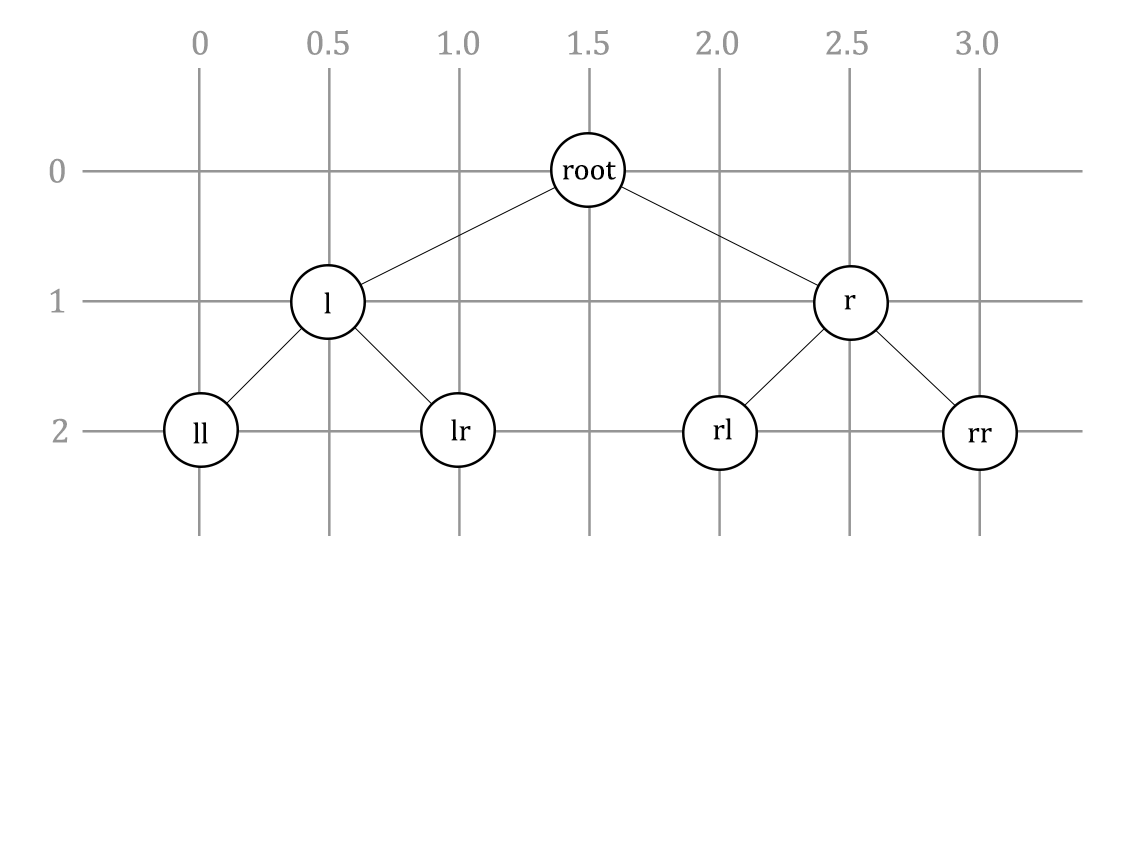
<style>
.page{position:relative;width:1135px;height:850px;background:#ffffff}
.page>*{position:absolute;margin:0}
.t1{font:35px "Cambria";color:#959595}
.t2{font:30px "Cambria";color:#000000}
</style>
<div class="page">
<p class="t1" style="left:192px;top:30px;width:16px;height:25px">0</p>
<p class="t1" style="left:307px;top:30px;width:42px;height:25px">0.5</p>
<p class="t1" style="left:438px;top:30px;width:42px;height:25px">1.0</p>
<p class="t1" style="left:568px;top:30px;width:41px;height:25px">1.5</p>
<p class="t1" style="left:696px;top:30px;width:43px;height:25px">2.0</p>
<p class="t1" style="left:826px;top:30px;width:42px;height:25px">2.5</p>
<p class="t1" style="left:956px;top:30px;width:43px;height:25px">3.0</p>
<p class="t1" style="left:49px;top:158px;width:16px;height:25px">0</p>
<p class="t2" style="left:562px;top:161px;width:54px;height:19px">root</p>
<p class="t1" style="left:50px;top:288px;width:15px;height:25px">1</p>
<p class="t2" style="left:324px;top:292px;width:7px;height:22px">l</p>
<p class="t2" style="left:844px;top:295px;width:12px;height:15px">r</p>
<p class="t1" style="left:52px;top:418px;width:16px;height:25px">2</p>
<p class="t2" style="left:193px;top:422px;width:15px;height:22px">ll</p>
<p class="t2" style="left:451px;top:419px;width:20px;height:22px">lr</p>
<p class="t2" style="left:713px;top:418px;width:19px;height:22px">rl</p>
<p class="t2" style="left:968px;top:428px;width:24px;height:15px">rr</p>
</div>
